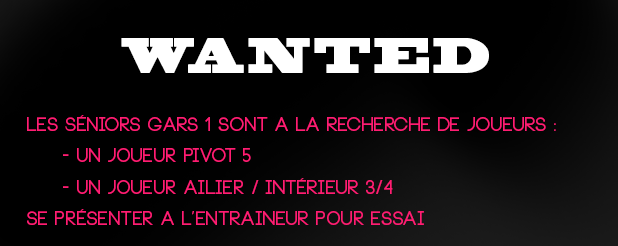
<style>
.page{position:relative;width:618px;height:246px;background:#000000}
.page>*{position:absolute;margin:0}
.t1{font:46.9px "BlackoakStd";letter-spacing:0.1em;color:#ffffff;scale:0.67 1}
.t2{font:18.8px/31.2px "Neou-Bold";color:#ff1d72}
</style>
<div class="page">
<p class="t1" style="left:121px;top:38px;width:368px;height:35px">WANTED</p>
<p class="t2" style="left:27px;top:115px;width:529px;height:110px">Les séniors Gars 1 sont a la recherche de joueurs :<br> - Un joueur pivot 5<br> - un joueur ailier / intérieur 3/4<br>Se présenter a l’entraineur pour essai</p>
</div>
